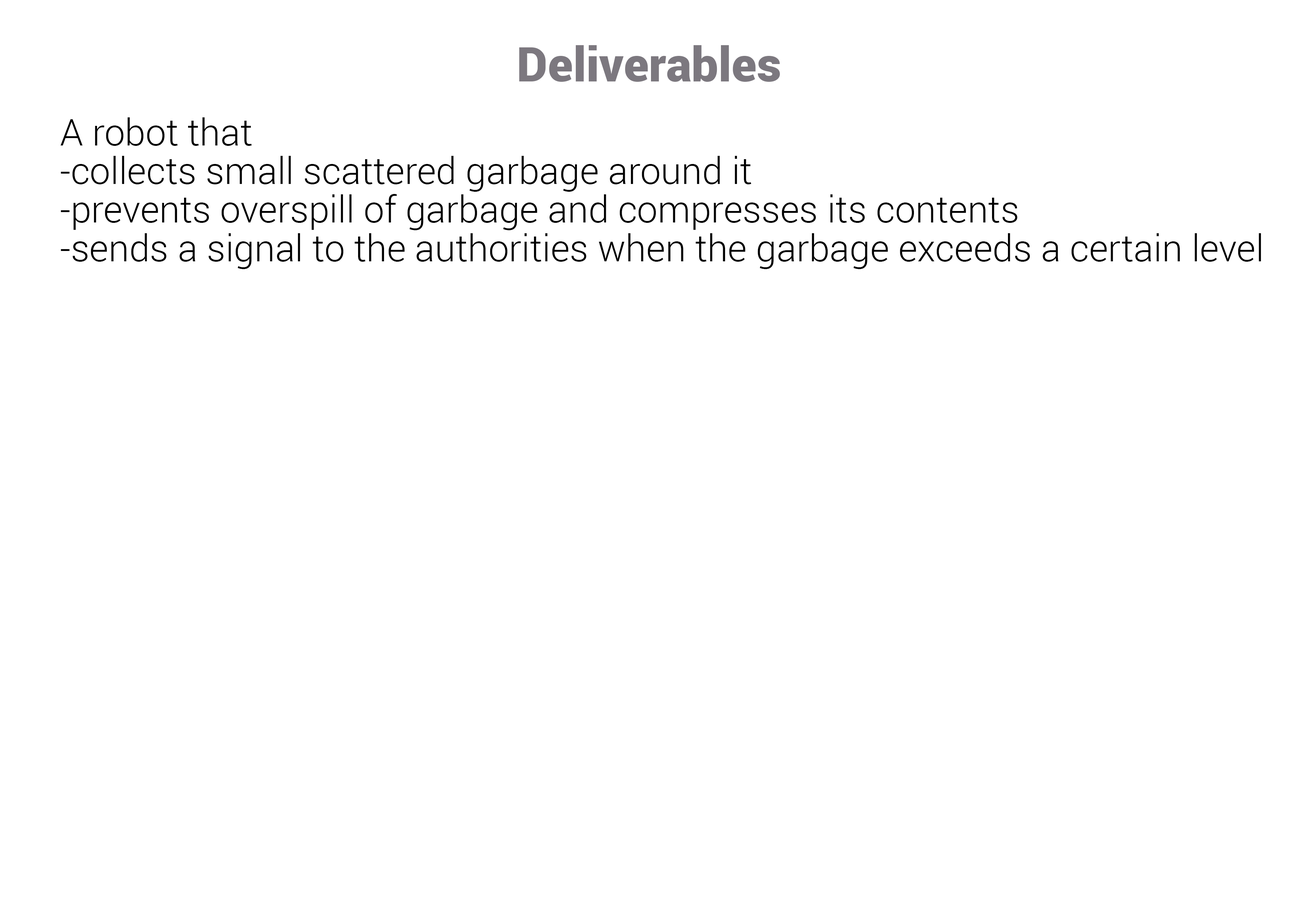
<style>
.page{position:relative;width:1299px;height:918px;background:#ffffff}
.page>*{position:absolute;margin:0}
.t1{font:47.8px "Roboto-Black";color:#7c787f}
.t2{font:37px/38.6px "Roboto-Light";color:#000000}
</style>
<div class="page">
<p class="t1" style="left:519px;top:45px;width:261px;height:37px">Deliverables</p>
<p class="t2" style="left:60px;top:117px;width:1201px;height:152px">A robot that<br>-collects small scattered garbage around it<br>-prevents overspill of garbage and compresses its contents<br>-sends a signal to the authorities when the garbage exceeds a certain level</p>
</div>
